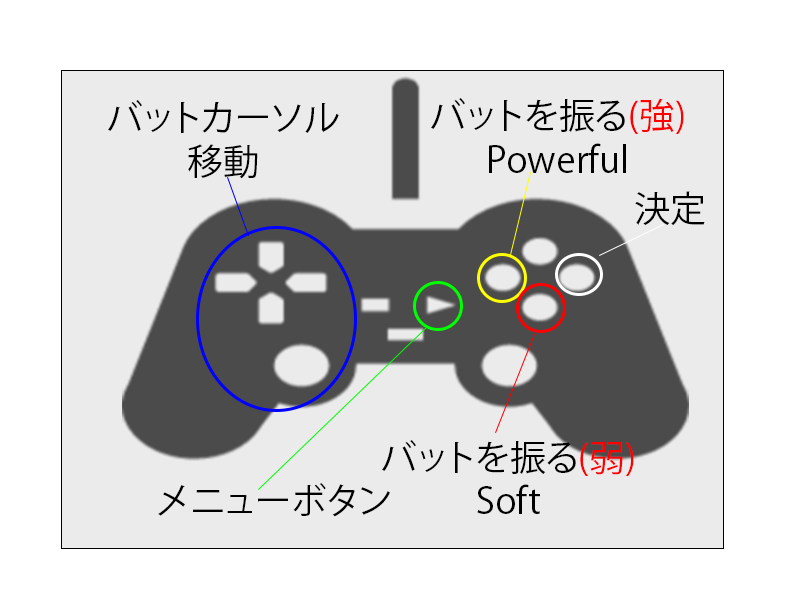
<style>
.page{position:relative;width:800px;height:600px;background:#ebebeb}
.page>*{position:absolute;margin:0}
.t1{font:36px "KozGoPr6N-Regular";color:#000000}
.t2{font:36px "KozGoPr6N-Regular";color:#ff0000}
</style>
<div class="page">
<p class="t1" style="left:108px;top:100px;width:231px;height:79px;text-align:center">バットカーソル<br>移動</p>
<p class="t1" style="left:431px;top:98px;width:253px;height:75px;text-align:center">バットを振る<span class="t2">(強)<br></span>Powerful</p>
<p class="t1" style="left:635px;top:191px;width:70px;height:35px">決定</p>
<p class="t1" style="left:382px;top:440px;width:252px;height:74px;text-align:center">バットを振る<span class="t2">(弱)<br></span>Soft</p>
<p class="t1" style="left:158px;top:483px;width:232px;height:34px">メニューボタン</p>
</div>
